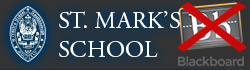
<style>
.page{position:relative;width:250px;height:70px}
.page>*{position:absolute;margin:0}
.t1{font:68.8px "LithosPro-Regular";letter-spacing:0.03em;color:#cc0707;scale:1.57 1}
.t2{font:24px "AGaramondPro-Regular";color:#ffffff}
</style>
<div class="page">
<p class="t1" style="left:177px;top:2px;width:71px;height:50px">X</p>
<p class="t2" style="left:59px;top:11px;width:121px;height:46px">ST. MARK’S<br>SCHOOL</p>
</div>
